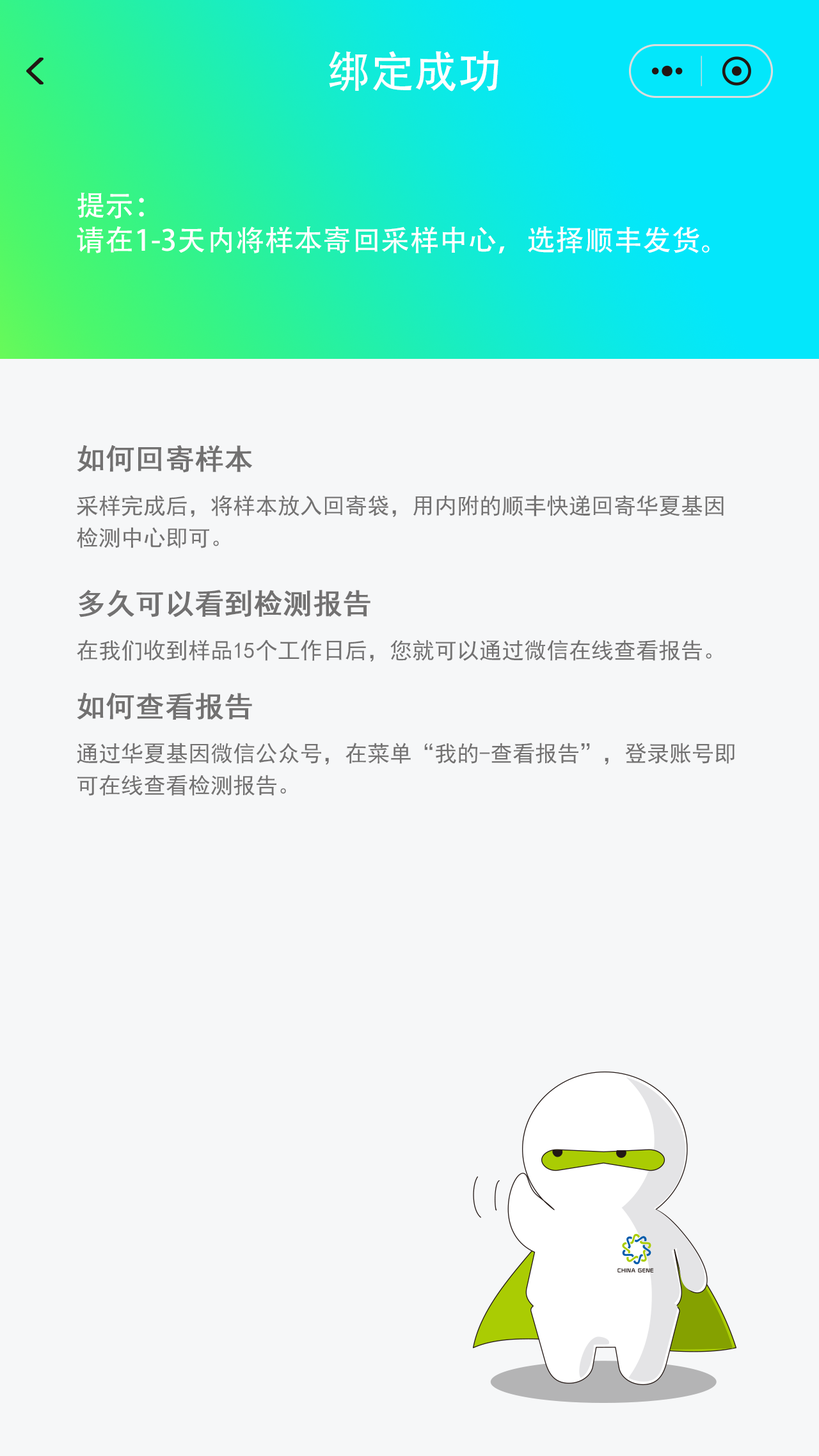
<style>
.page{position:relative;width:819px;height:1456px;background:#f6f7f8}
.page>*{position:absolute;margin:0}
.t1{font:43.5px "AdobeHeitiStd-Regular";letter-spacing:0.01em;color:#ffffff}
.t2{font:28.8px "AdobeHeitiStd-Regular";letter-spacing:0.01em;color:#ffffff}
.t3{font:28.8px "SimHei";color:#727171;font-weight:bold}
.t4{font:22.4px/32px "SimHei";color:#727171}
.t5{font:22.4px "SimHei";color:#727171}
</style>
<div class="page">
<p class="t1" style="left:329px;top:51px;width:169px;height:40px">绑定成功</p>
<p class="t2" style="left:77px;top:193px;width:633px;height:61px">提示：<br>请在1-3天内将样本寄回采样中心，选择顺丰发货。</p>
<p class="t3" style="left:77px;top:445px;width:175px;height:28px">如何回寄样本</p>
<p class="t4" style="left:77px;top:495px;width:647px;height:53px">采样完成后，将样本放入回寄袋，用内附的顺丰快递回寄华夏基因<br>检测中心即可。</p>
<p class="t3" style="left:79px;top:590px;width:291px;height:27px">多久可以看到检测报告</p>
<p class="t5" style="left:77px;top:640px;width:634px;height:22px">在我们收到样品15个工作日后，您就可以通过微信在线查看报告。</p>
<p class="t3" style="left:77px;top:693px;width:175px;height:27px">如何查看报告</p>
<p class="t4" style="left:77px;top:743px;width:657px;height:53px">通过华夏基因微信公众号，在菜单“我的-查看报告”，登录账号即<br>可在线查看检测报告。</p>
</div>
